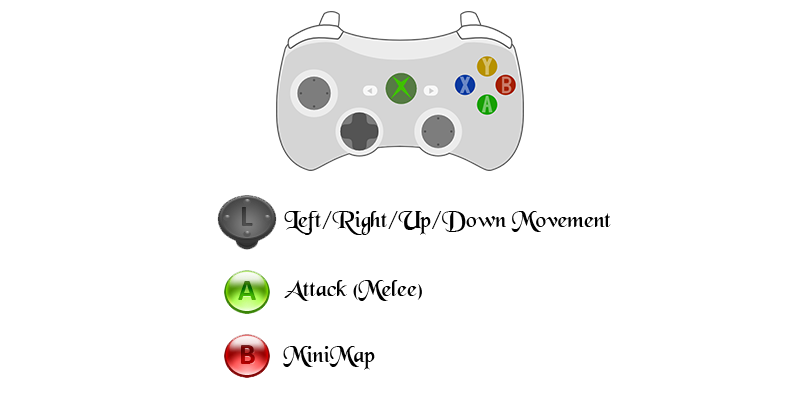
<style>
.page{position:relative;width:800px;height:400px;background:#ffffff}
.page>*{position:absolute;margin:0}
.t1{font:24px "BlackChancery";color:#010101}
</style>
<div class="page">
<p class="t1" style="left:284px;top:211px;width:327px;height:24px">Left/Right/Up/Down Movement</p>
<p class="t1" style="left:284px;top:280px;width:138px;height:21px">Attack (Melee)</p>
<p class="t1" style="left:283px;top:346px;width:92px;height:24px">MiniMap</p>
</div>
